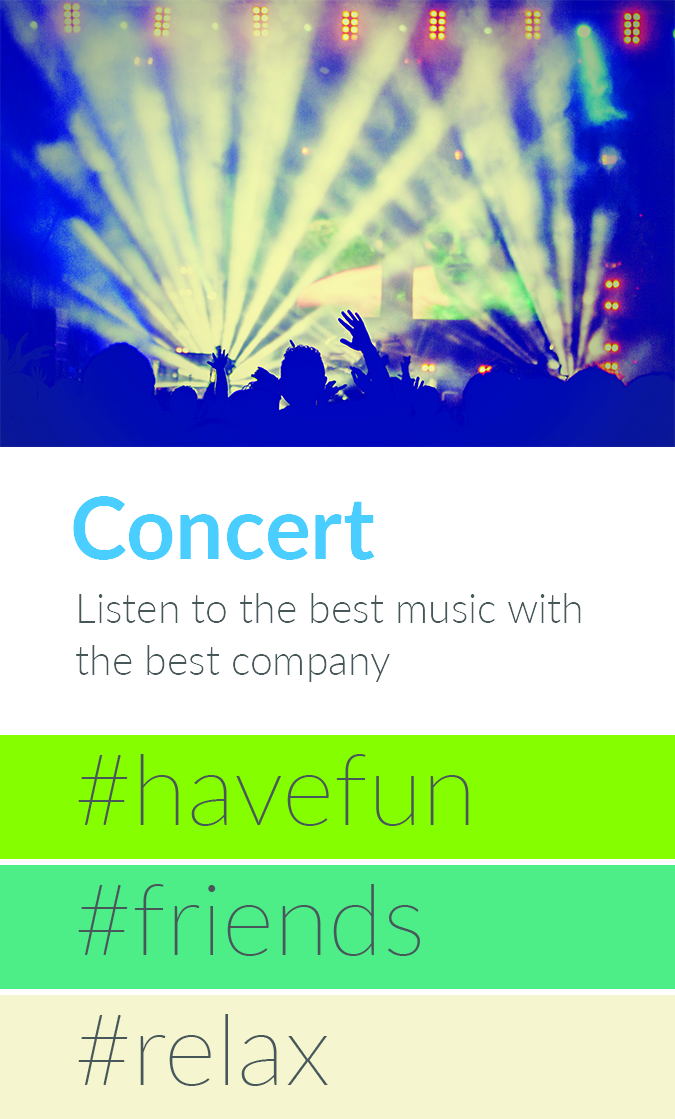
<style>
.page{position:relative;width:675px;height:1119px;background:#ffffff}
.page>*{position:absolute;margin:0}
.t1{font:86px "Lato-Bold";color:#4acdff}
.t2{font:41px/52px "Lato-Light";color:#48585a}
</style>
<div class="page">
<p class="t1" style="left:73px;top:496px;width:302px;height:64px">Concert</p>
<p class="t2" style="left:76px;top:593px;width:505px;height:89px;text-align:right">Listen to the best music with the best company</p>
</div>
